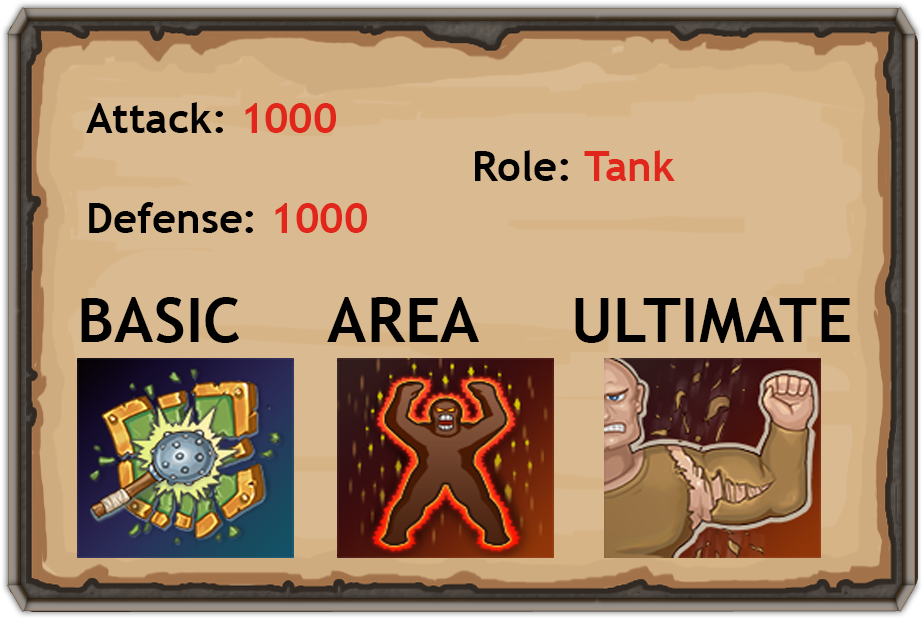
<style>
.page{position:relative;width:923px;height:619px;background:#daba91}
.page>*{position:absolute;margin:0}
.t1{font:41.7px "TrebuchetMS-Bold";color:#000000}
.t2{font:41.7px "TrebuchetMS-Bold";color:#e1261c}
.t3{font:62.5px "TrebuchetMS-Bold";color:#000000}
</style>
<div class="page">
<p class="t1" style="left:86px;top:102px;width:281px;height:131px">Attack: <span class="t2">1000 <br></span><br>Defense: <span class="t2">1000</span></p>
<p class="t1" style="left:475px;top:150px;width:200px;height:31px">Role: <span class="t2">Tank</span></p>
<p class="t3" style="left:81px;top:297px;width:769px;height:46px">BASIC    AREA     ULTIMATE</p>
</div>
